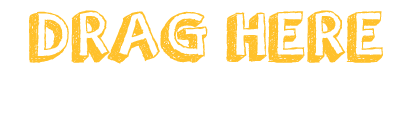
<style>
.page{position:relative;width:419px;height:132px;background:#ffffff}
.page>*{position:absolute;margin:0}
.t1{font:72.3px "orangejuice";letter-spacing:0.05em;color:#ffc12b}
</style>
<div class="page">
<p class="t1" style="left:29px;top:10px;width:354px;height:54px">DRAG HERE</p>
</div>
